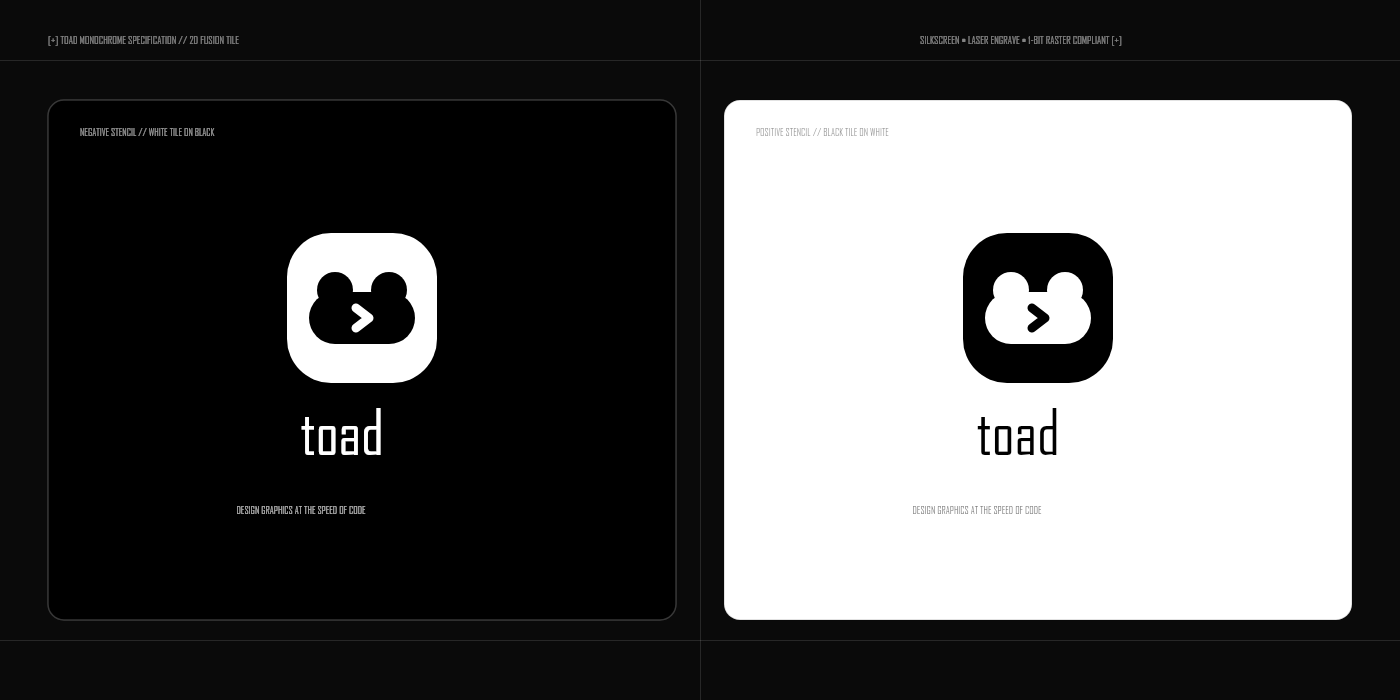
<style>
.page{position:relative;width:1400px;height:700px;background:#000000}
.page>*{position:absolute;margin:0}
.t1{font:10.5px "Consolas-Bold";letter-spacing:0.143em}
.t2{font:10px "Consolas-Bold";letter-spacing:0.15em}
.t3{font:60px "SegoeUI-Bold";letter-spacing:-0.033em;color:#ffffff}
.t4{font:60px "SegoeUI-Bold";letter-spacing:-0.033em;color:#000000}
</style>
<div class="page">
<p class="t1" style="left:48px;top:36px;width:370px;height:13px">[+] TOAD MONOCHROME SPECIFICATION // 2D FUSION TILE</p>
<p class="t1" style="left:920px;top:36px;width:399px;height:13px">SILKSCREEN • LASER ENGRAVE • 1-BIT RASTER COMPLIANT [+]</p>
<p class="t2" style="left:80px;top:128px;width:272px;height:13px">NEGATIVE STENCIL // WHITE TILE ON BLACK</p>
<p class="t2" style="left:756px;top:128px;width:272px;height:13px">POSITIVE STENCIL // BLACK TILE ON WHITE</p>
<p class="t3" style="left:301px;top:407px;width:123px;height:75px">toad</p>
<p class="t4" style="left:977px;top:407px;width:123px;height:75px">toad</p>
<p class="t2" style="left:237px;top:506px;width:251px;height:13px">DESIGN GRAPHICS AT THE SPEED OF CODE</p>
<p class="t2" style="left:913px;top:506px;width:251px;height:13px">DESIGN GRAPHICS AT THE SPEED OF CODE</p>
</div>
